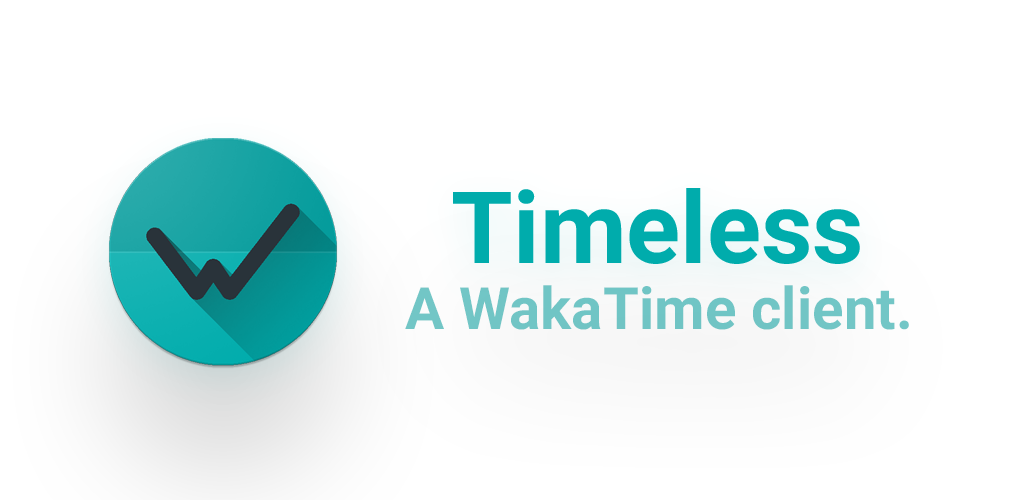
<style>
.page{position:relative;width:1024px;height:500px;background:#ffffff}
.page>*{position:absolute;margin:0}
.t1{font:58.3px "Roboto-Bold";color:#70c5c5}
</style>
<div class="page">
<p class="t1" style="left:405px;top:285px;width:504px;height:45px">A WakaTime client.</p>
</div>
